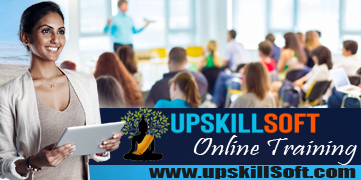
<style>
.page{position:relative;width:361px;height:180px}
.page>*{position:absolute;margin:0}
.t1{font:25.1px "Pristina-Regular";color:#fffdfd;scale:1.28 1}
.t2{font:14.7px "Impact";color:#1b1b1d;scale:1.64 1}
</style>
<div class="page">
<p class="t1" style="left:193px;top:135px;width:164px;height:30px">Online Training</p>
<p class="t2" style="left:149px;top:166px;width:207px;height:13px">www.upskillSoft.com</p>
</div>
